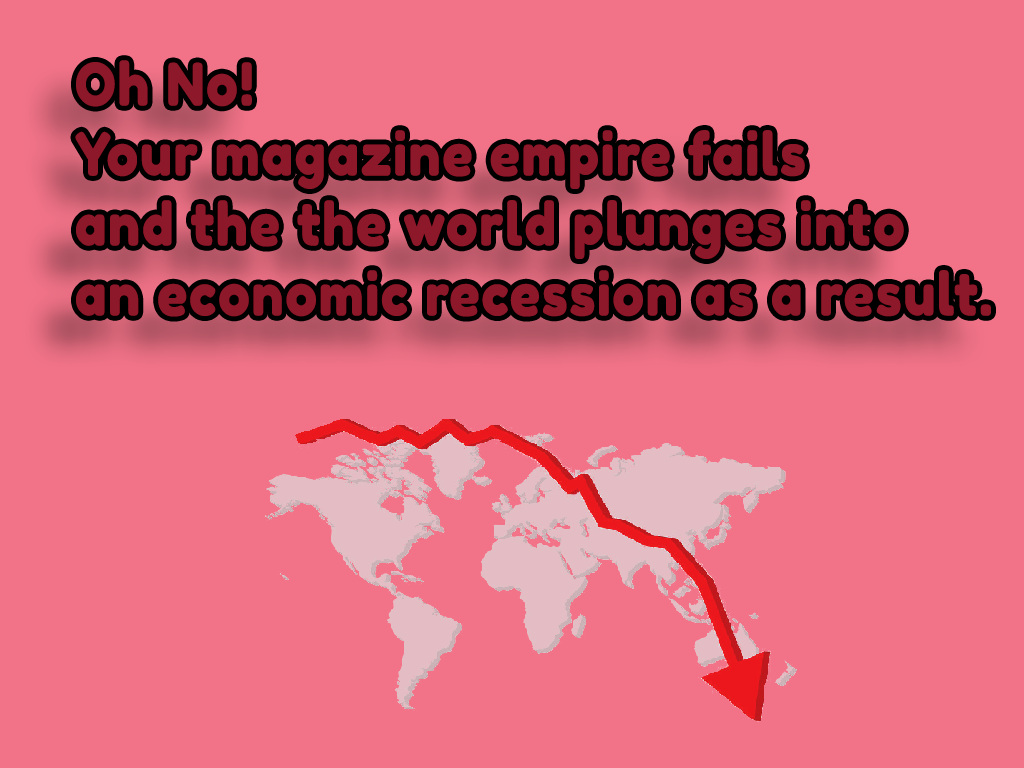
<style>
.page{position:relative;width:1024px;height:768px;background:#f27388}
.page>*{position:absolute;margin:0}
.t1{font:58.3px "FredokaOne-Regular";letter-spacing:0.01em;color:#8d1829;font-weight:bold;scale:0.9 1}
</style>
<div class="page">
<p class="t1" style="left:75px;top:60px;width:916px;height:257px">Oh No!<br>Your magazine empire fails<br>and the the world plunges into<br>an economic recession as a result.</p>
</div>
